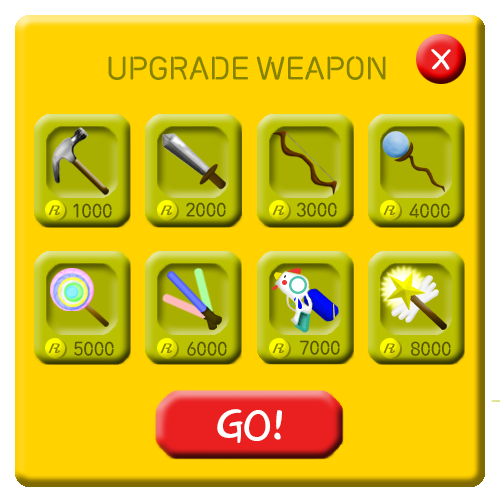
<style>
.page{position:relative;width:500px;height:500px;background:#ffd200}
.page>*{position:absolute;margin:0}
.t1{font:35.6px "DXHgrmB-KSCpc-EUC-H";letter-spacing:-0.025em;color:#ffffff}
.t2{font:29.7px "RixNeonSignB";letter-spacing:-0.025em;color:#858300}
.t3{font:17.8px "RixNeonSignB";letter-spacing:-0.025em;color:#565500}
.t4{font:47.5px "DXHgrmB-KSCpc-EUC-H";letter-spacing:-0.025em;color:#ffffff}
</style>
<div class="page">
<p class="t1" style="left:431px;top:49px;width:20px;height:21px">X</p>
<p class="t2" style="left:108px;top:56px;width:278px;height:24px">UPGRADE WEAPON</p>
<p class="t3" style="left:73px;top:203px;width:39px;height:15px">1000</p>
<p class="t3" style="left:186px;top:202px;width:40px;height:15px">2000</p>
<p class="t3" style="left:296px;top:202px;width:41px;height:15px">3000</p>
<p class="t3" style="left:409px;top:203px;width:41px;height:15px">4000</p>
<p class="t3" style="left:74px;top:341px;width:40px;height:15px">5000</p>
<p class="t3" style="left:187px;top:341px;width:40px;height:15px">6000</p>
<p class="t3" style="left:299px;top:340px;width:41px;height:15px">7000</p>
<p class="t3" style="left:410px;top:341px;width:41px;height:15px">8000</p>
<p class="t4" style="left:217px;top:409px;width:65px;height:34px">GO!</p>
</div>
